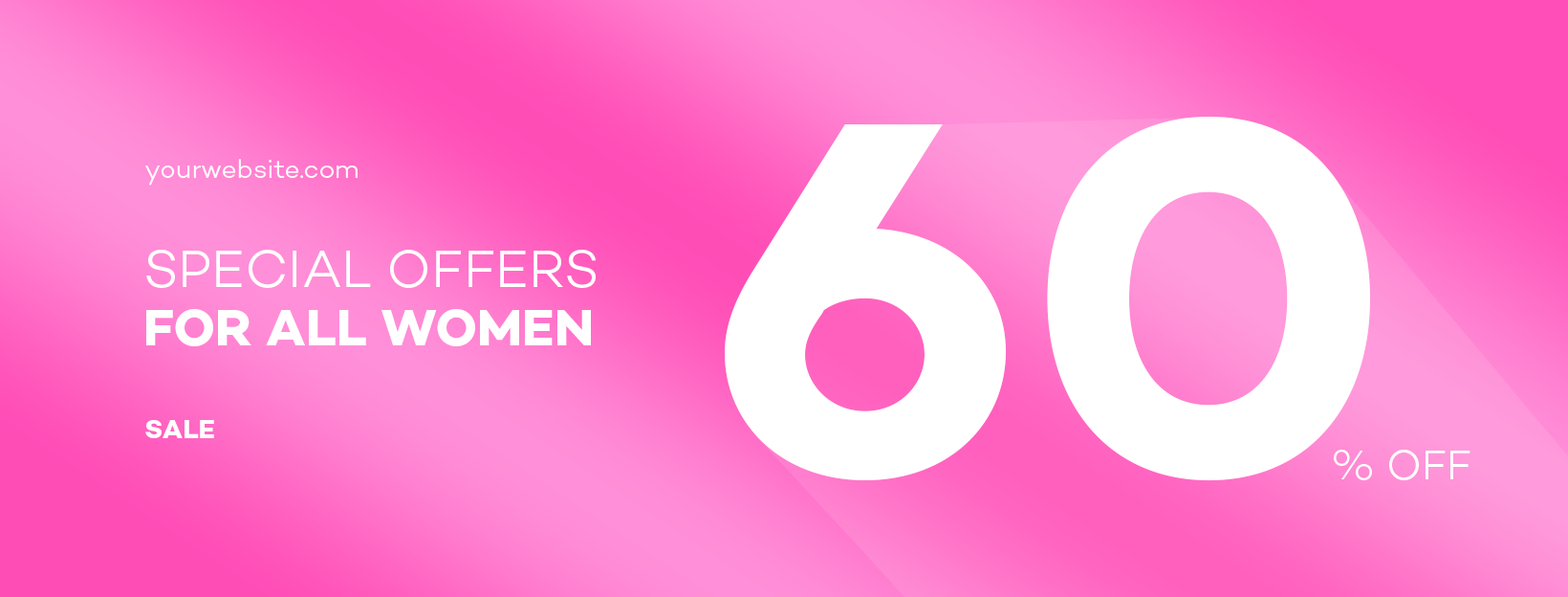
<style>
.page{position:relative;width:1568px;height:597px}
.page>*{position:absolute;margin:0}
.t1{font:511.5px "Campton-BoldDEMO";color:#ffffff;text-transform:uppercase}
.t2{font:26.8px "Campton-LightDEMO";color:#ffffff}
.t3{font:53.5px/58.3px "Campton-LightDEMO";color:#ffffff;text-transform:uppercase}
.t4{font:52.6px/58.3px "Campton-BoldDEMO";color:#ffffff;text-transform:uppercase}
.t5{font:26.8px "Campton-BoldDEMO";color:#ffffff;text-transform:uppercase}
.t6{font:42.1px "Campton-LightDEMO";color:#ffffff}
</style>
<div class="page">
<p class="t1" style="left:725px;top:116px;width:645px;height:365px">60</p>
<p class="t2" style="left:145px;top:159px;width:213px;height:26px">yourwebsite.com</p>
<p class="t3" style="left:146px;top:250px;width:450px;height:96px">special offers<br><span class="t4">for All women</span></p>
<p class="t5" style="left:145px;top:420px;width:69px;height:18px">Sale</p>
<p class="t6" style="left:1334px;top:449px;width:136px;height:31px">% OFF</p>
</div>
